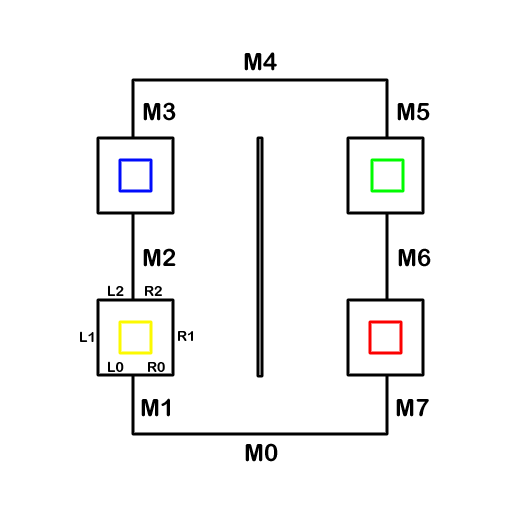
<style>
.page{position:relative;width:512px;height:512px;background:#ffffff}
.page>*{position:absolute;margin:0}
.t1{font:24px "ArialRoundedMTBold";color:#000000}
.t2{font:14px "ArialRoundedMTBold";color:#000000}
</style>
<div class="page">
<p class="t1" style="left:244px;top:52px;width:33px;height:19px">M4</p>
<p class="t1" style="left:143px;top:102px;width:33px;height:19px">M3</p>
<p class="t1" style="left:397px;top:103px;width:33px;height:18px">M5</p>
<p class="t1" style="left:143px;top:248px;width:33px;height:19px">M2</p>
<p class="t1" style="left:398px;top:248px;width:33px;height:19px">M6</p>
<p class="t2" style="left:108px;top:285px;width:16px;height:11px">L2</p>
<p class="t2" style="left:145px;top:286px;width:17px;height:10px">R2</p>
<p class="t2" style="left:80px;top:331px;width:14px;height:11px">L1</p>
<p class="t2" style="left:178px;top:331px;width:15px;height:10px">R1</p>
<p class="t2" style="left:108px;top:361px;width:16px;height:11px">L0</p>
<p class="t2" style="left:148px;top:362px;width:17px;height:10px">R0</p>
<p class="t1" style="left:141px;top:398px;width:29px;height:19px">M1</p>
<p class="t1" style="left:396px;top:399px;width:33px;height:18px">M7</p>
<p class="t1" style="left:245px;top:443px;width:33px;height:19px">M0</p>
</div>
